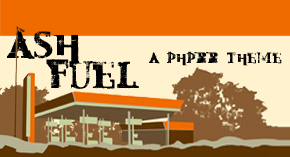
<style>
.page{position:relative;width:290px;height:157px;background:#fff2cf}
.page>*{position:absolute;margin:0}
.t1{font:36px/6px "Mest";letter-spacing:0.05em;color:#000000}
.t2{font:14px "Mest";letter-spacing:0.05em;color:#000000}
</style>
<div class="page">
<p class="t1" style="left:7px;top:30px;width:132px;height:59px">Ash<br><br><br><br> <br>  fuel</p>
<p class="t2" style="left:149px;top:51px;width:133px;height:15px">a phpbb theme</p>
</div>
